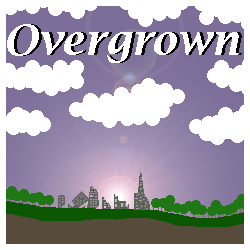
<style>
.page{position:relative;width:250px;height:250px;background:#ffffff}
.page>*{position:absolute;margin:0}
.t1{font:41.7px "LucidaBright-DemiItalic";color:#ffffff}
</style>
<div class="page">
<p class="t1" style="left:7px;top:24px;width:232px;height:39px">Overgrown</p>
</div>
